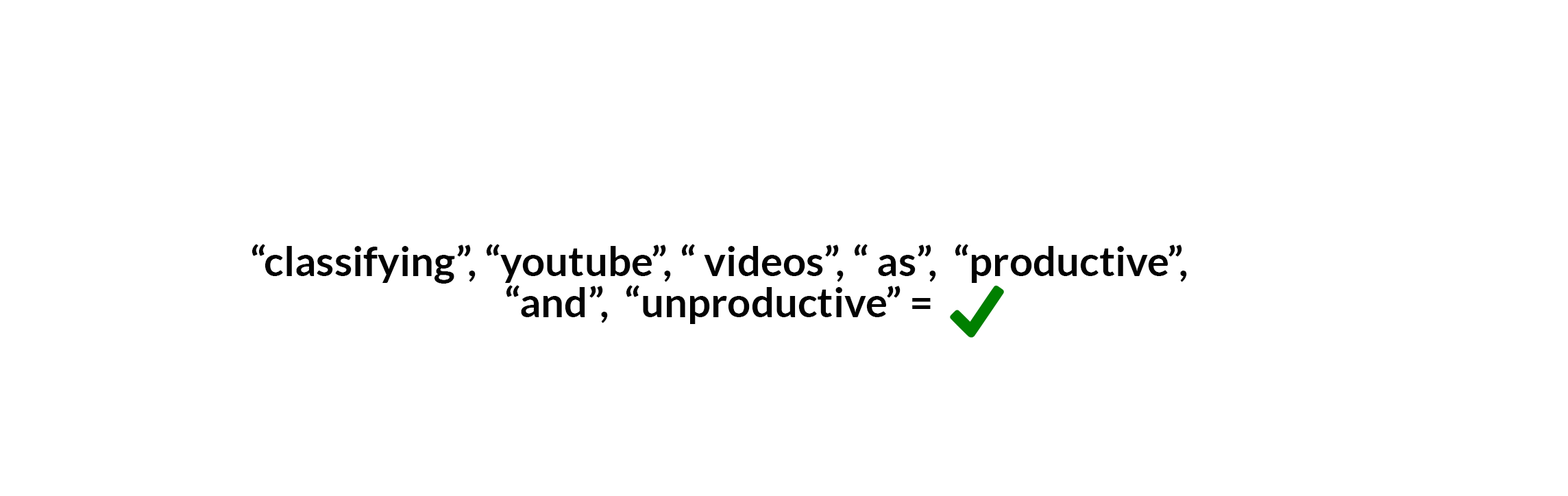
<style>
.page{position:relative;width:1568px;height:496px;background:#ffffff}
.page>*{position:absolute;margin:0}
.t1{font:41.1px/41.1px "Lato-Bold";color:#030303}
</style>
<div class="page">
<p class="t1" style="left:252px;top:244px;width:935px;height:80px;text-align:center">“classifying”, “youtube”, “ videos”, “ as”,  “productive”, <br>“and”,  “unproductive” =</p>
</div>
